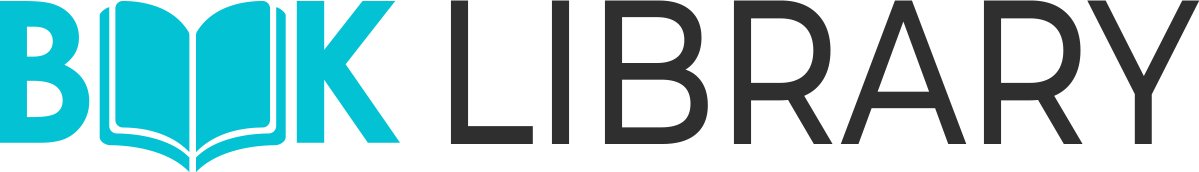
<style>
.page{position:relative;width:1199px;height:172px;background:#ffffff}
.page>*{position:absolute;margin:0}
.t1{font:205px "Montserrat-Medium";color:#2f2f2f;scale:0.83 1}
</style>
<div class="page">
<p class="t1" style="left:450px;top:0px;width:750px;height:144px">LIBRARY</p>
</div>
